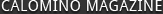
<style>
.page{position:relative;width:163px;height:14px;background:#333333}
.page>*{position:absolute;margin:0}
.t1{font:15px "DroidSans";letter-spacing:0.03em;color:#ffffff}
</style>
<div class="page">
<p class="t1" style="left:1px;top:0px;width:161px;height:11px">CALOMINO MAGAZINE</p>
</div>
